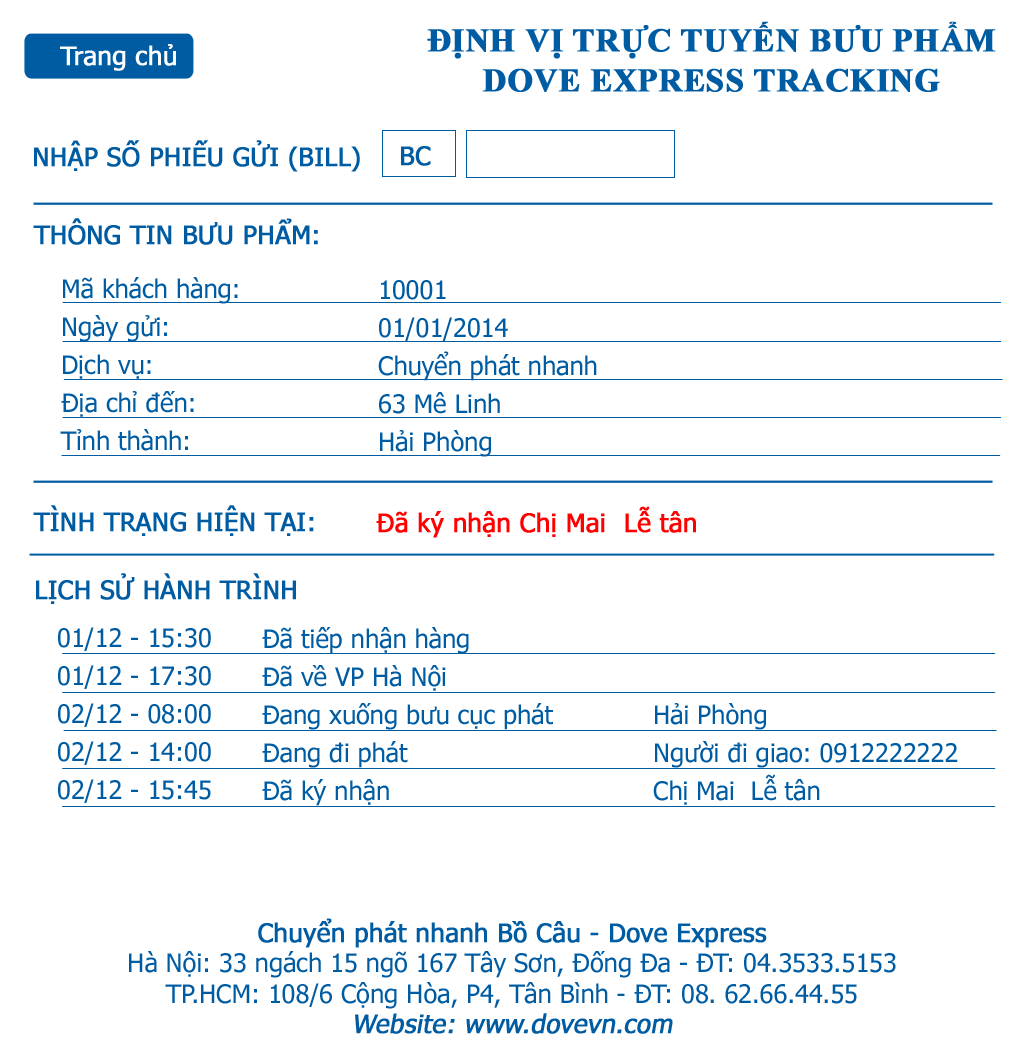
<style>
.page{position:relative;width:1024px;height:1052px;background:#ffffff}
.page>*{position:absolute;margin:0}
.t1{font:32.8px "TimesNewRomanPS-BoldMT";color:#005ca2;font-weight:bold}
.t2{font:25.4px "Tahoma";color:#fefefe;font-weight:bold}
.t3{font:25.4px "Tahoma";color:#005ca2;font-weight:bold}
.t4{font:25.4px/38.1px "Tahoma";color:#005ca2}
.t5{font:25.4px "Tahoma";color:#ff0000;font-weight:bold}
.t6{font:25.4px/30.5px "Tahoma";color:#005ca2}
.t7{font:25.4px/30.5px "Tahoma";color:#005ca2;font-weight:bold}
.t8{font:25.4px/30.5px "Tahoma";color:#005ca2;font-weight:bold;font-style:italic}
</style>
<div class="page">
<p class="t1" style="left:427px;top:21px;width:569px;height:71px;text-align:center">ĐỊNH VỊ TRỰC TUYẾN BƯU PHẨM <br>DOVE EXPRESS TRACKING</p>
<p class="t2" style="left:60px;top:44px;width:116px;height:27px">Trang chủ</p>
<p class="t3" style="left:34px;top:140px;width:326px;height:32px">NHẬP SỐ PHIẾU GỬI (BILL)</p>
<p class="t3" style="left:401px;top:146px;width:30px;height:20px">BC</p>
<p class="t3" style="left:33px;top:218px;width:285px;height:27px">THÔNG TIN BƯU PHẨM:</p>
<p class="t4" style="left:60px;top:277px;width:178px;height:174px">Mã khách hàng:<br>Ngày gửi:<br>Dịch vụ:<br>Địa chỉ đến:<br>Tỉnh thành:</p>
<p class="t4" style="left:378px;top:280px;width:219px;height:177px">10001<br>01/01/2014<br>Chuyển phát nhanh<br>63 Mê Linh<br>Hải Phòng</p>
<p class="t3" style="left:33px;top:505px;width:281px;height:31px">TÌNH TRẠNG HIỆN TẠI:</p>
<p class="t5" style="left:376px;top:506px;width:320px;height:32px">Đã ký nhận Chị Mai  Lễ tân</p>
<p class="t3" style="left:36px;top:573px;width:260px;height:31px">LỊCH SỬ HÀNH TRÌNH</p>
<p class="t4" style="left:58px;top:627px;width:153px;height:176px">01/12 - 15:30  <br>01/12 - 17:30<br>02/12 - 08:00<br>02/12 - 14:00<br>02/12 - 15:45</p>
<p class="t4" style="left:262px;top:627px;width:291px;height:179px">Đã tiếp nhận hàng<br>Đã về VP Hà Nội<br>Đang xuống bưu cục phát<br>Đang đi phát<br>Đã ký nhận</p>
<p class="t4" style="left:653px;top:703px;width:305px;height:102px">Hải Phòng<br>Người đi giao: 0912222222<br>Chị Mai  Lễ tân</p>
<p class="t6" style="left:129px;top:918px;width:767px;height:116px;text-align:center"><span class="t7">Chuyển phát nhanh Bồ Câu - Dove Express<br></span>Hà Nội: 33 ngách 15 ngõ 167 Tây Sơn, Đống Đa - ÐT: 04.3533.5153 <br>TP.HCM: 108/6 Cộng Hòa, P4, Tân Bình - ÐT: 08. 62.66.44.55 <br><span class="t8">Website: www.dovevn.com</span></p>
</div>
